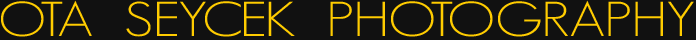
<style>
.page{position:relative;width:696px;height:40px;background:#111111}
.page>*{position:absolute;margin:0}
.t1{font:48px "GeosansLight";color:#ffcc00;scale:1.21 1}
</style>
<div class="page">
<p class="t1" style="left:1px;top:0px;width:693px;height:37px">OTA  SEYCEK  PHOTOGRAPHY</p>
</div>
